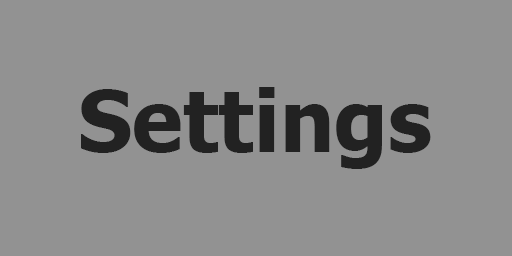
<style>
.page{position:relative;width:512px;height:256px;background:#929292}
.page>*{position:absolute;margin:0}
.t1{font:85.3px "Tahoma-Bold";color:#222222}
</style>
<div class="page">
<p class="t1" style="left:81px;top:87px;width:350px;height:82px">Settings</p>
</div>
